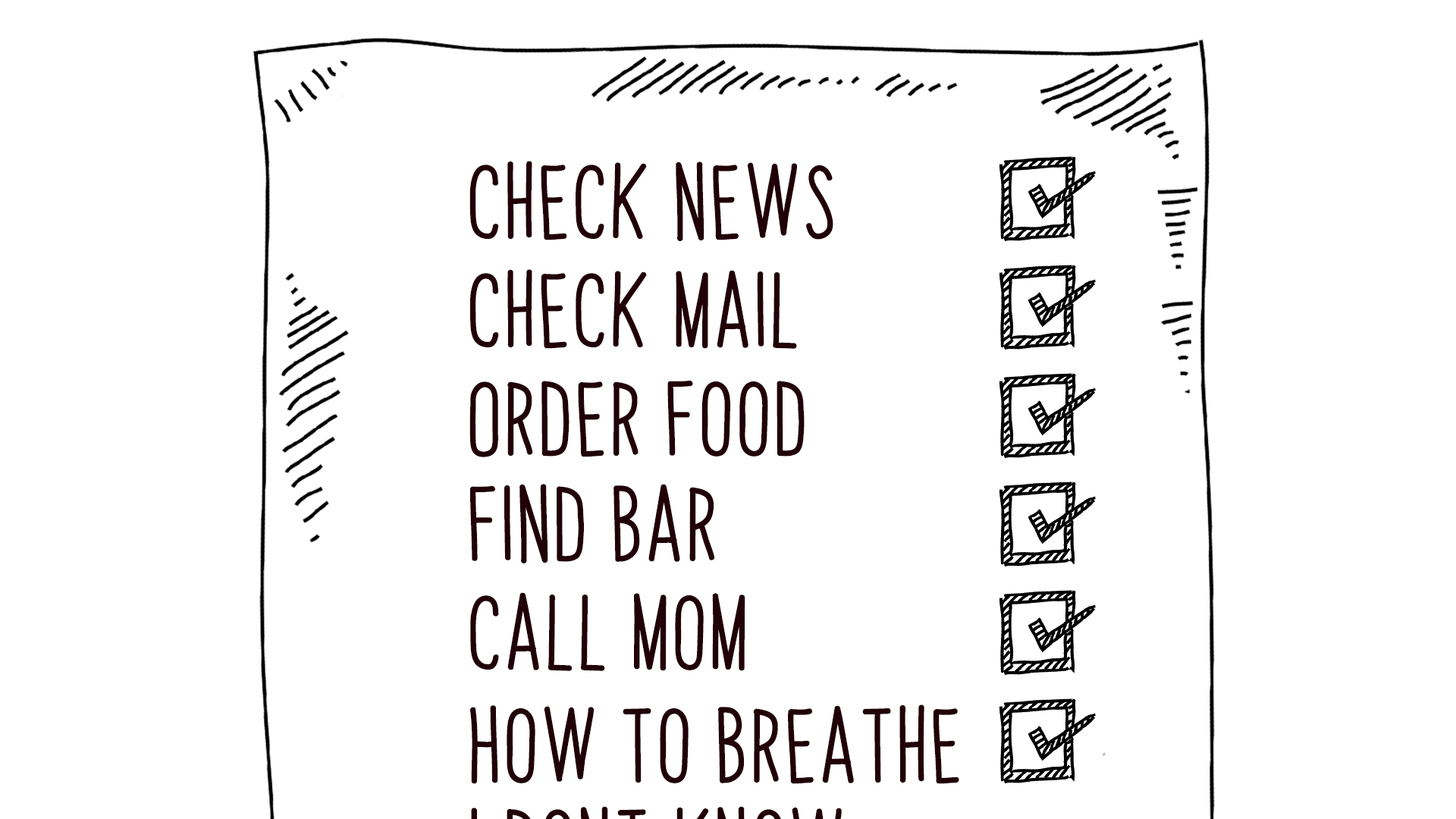
<style>
.page{position:relative;width:1456px;height:819px;background:#ffffff}
.page>*{position:absolute;margin:0}
.t1{font:63.7px "PapayaSunrise";color:#210008;font-weight:bold}
</style>
<div class="page">
<p class="t1" style="left:469px;top:161px;width:364px;height:80px">check news</p>
<p class="t1" style="left:470px;top:269px;width:327px;height:80px">check mail</p>
<p class="t1" style="left:469px;top:380px;width:336px;height:77px">Order food</p>
<p class="t1" style="left:470px;top:484px;width:245px;height:79px">find bar</p>
<p class="t1" style="left:470px;top:592px;width:275px;height:79px">call mom</p>
<p class="t1" style="left:470px;top:704px;width:489px;height:80px">How to breathe</p>
</div>
